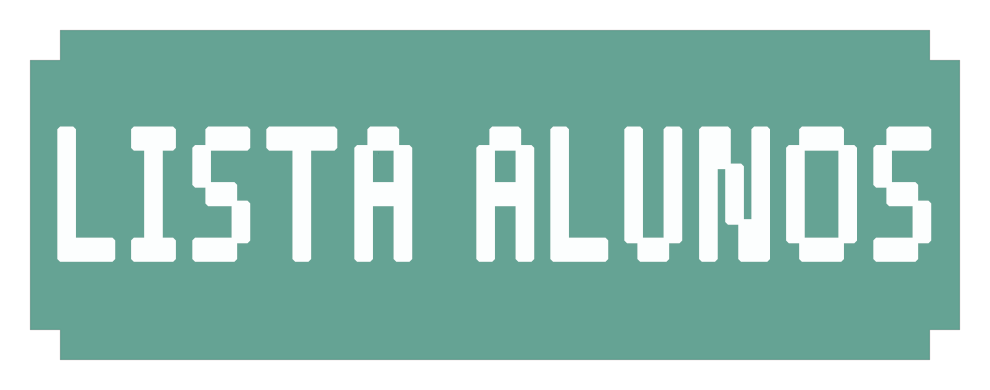
<style>
.page{position:relative;width:990px;height:390px;background:#65a394}
.page>*{position:absolute;margin:0}
.t1{font:240.8px "Pixelade";letter-spacing:0.025em;color:#fcfefe;font-weight:bold;scale:0.71 1}
</style>
<div class="page">
<p class="t1" style="left:57px;top:126px;width:875px;height:136px">LISTA ALUNOS</p>
</div>
